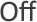
<style>
.page{position:relative;width:37px;height:22px;background:#ffffff}
.page>*{position:absolute;margin:0}
.t1{font:30px "Calibri";color:#3c3c3c}
</style>
<div class="page">
<p class="t1" style="left:0px;top:0px;width:37px;height:22px">Off</p>
</div>
